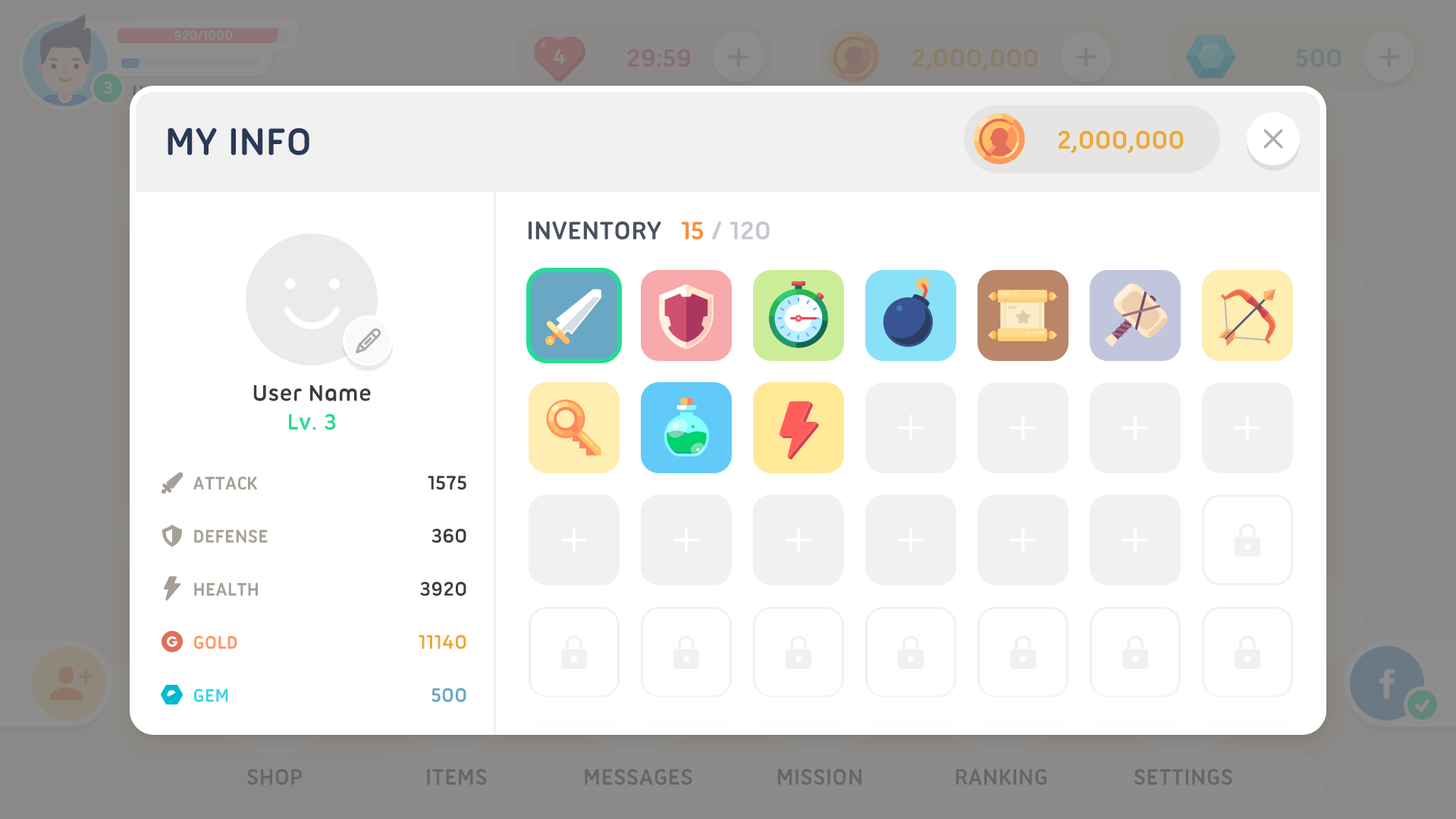
<style>
.page{position:relative;width:1456px;height:819px;background:#ffffff}
.page>*{position:absolute;margin:0}
.t1{font:40.9px "UbuntuTitling-Bold";color:#2a3957;text-transform:uppercase}
.t2{font:27.3px "UbuntuTitling-Bold";color:#eea835;text-transform:uppercase}
.t3{font:27.3px "UbuntuTitling-Bold";color:#4b5161;text-transform:uppercase}
.t4{font:27.3px "UbuntuTitling-Bold";color:#c5c8d0;text-transform:uppercase}
.t5{font:27.3px "UbuntuTitling-Bold";color:#f8913f;text-transform:uppercase}
.t6{font:24.3px "UbuntuTitling-Bold";color:#3f3c38}
.t7{font:24.3px "UbuntuTitling-Bold";color:#27dc95}
.t8{font:19.7px/53.1px "UbuntuTitling-Bold";color:#a59f96;text-transform:uppercase}
.t9{font:19.7px/53.1px "UbuntuTitling-Bold";color:#ff9661;text-transform:uppercase}
.t10{font:19.7px/53.1px "UbuntuTitling-Bold";color:#35d7ea;text-transform:uppercase}
.t11{font:21.2px/53.1px "UbuntuTitling-Bold";color:#3f3c38}
.t12{font:21.2px/53.1px "UbuntuTitling-Bold";color:#eea835}
.t13{font:21.2px/53.1px "UbuntuTitling-Bold";color:#69a7c4}
</style>
<div class="page">
<p class="t1" style="left:168px;top:127px;width:141px;height:28px">My Info</p>
<p class="t2" style="left:1058px;top:130px;width:125px;height:23px">2,000,000</p>
<p class="t3" style="left:529px;top:221px;width:132px;height:19px">Inventory</p>
<p class="t4" style="left:681px;top:221px;width:89px;height:19px"><span class="t5">15 </span>/ 120</p>
<p class="t6" style="left:253px;top:384px;width:118px;height:17px">User Name</p>
<p class="t7" style="left:289px;top:413px;width:47px;height:17px">Lv. 3</p>
<p class="t8" style="left:193px;top:476px;width:75px;height:226px">Attack<br>Defense<br>Health<br><span class="t9">Gold<br></span><span class="t10">Gem</span></p>
<p class="t11" style="left:419px;top:475px;width:47px;height:227px;text-align:right">1575<br>360<br>3920<br><span class="t12">11140<br></span><span class="t13">500</span></p>
</div>
